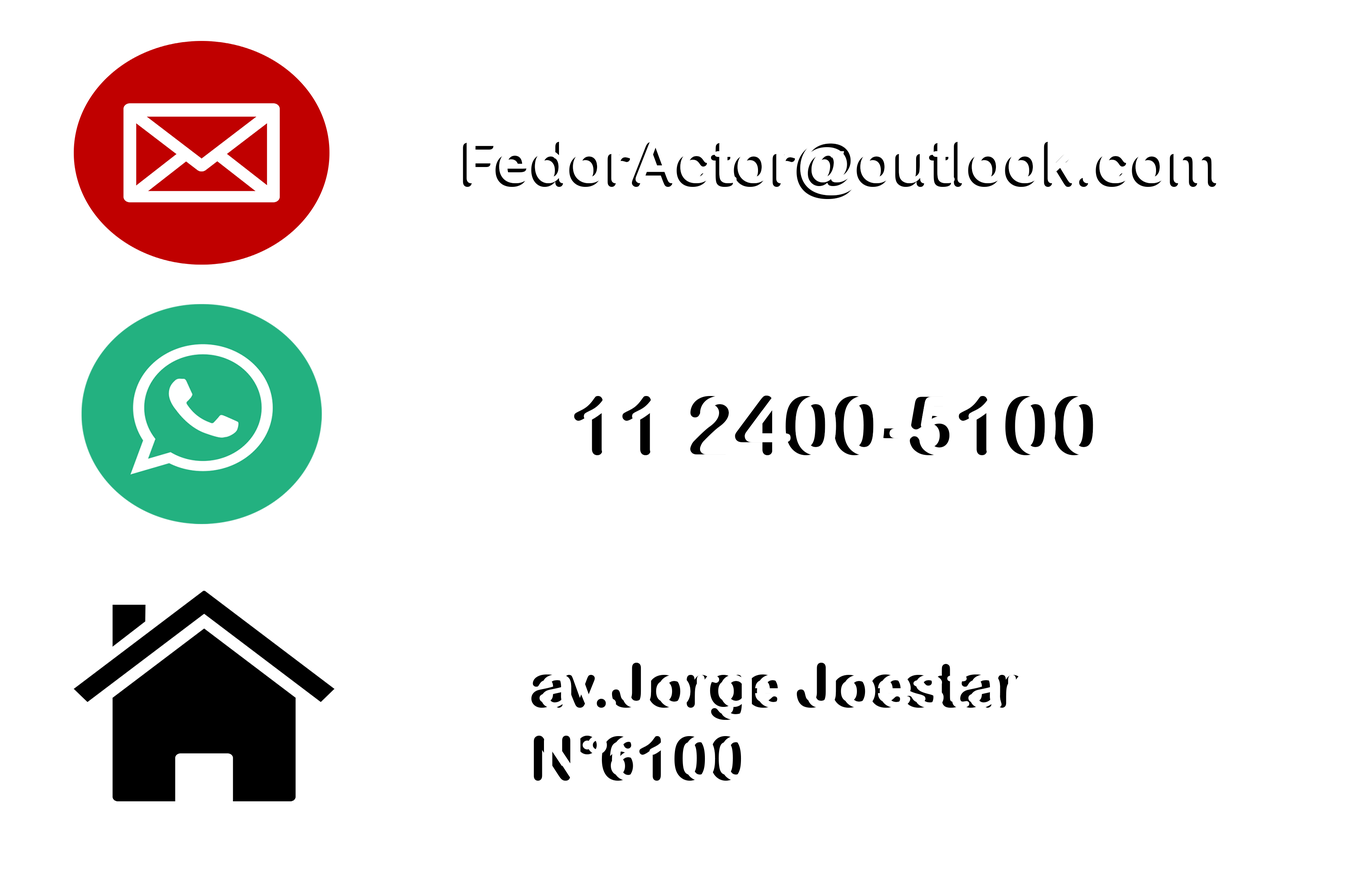
<style>
.page{position:relative;width:1351px;height:882px;background:#ffffff}
.page>*{position:absolute;margin:0}
.t1{font:60.8px "ArialRoundedMTBold"}
.t2{font:81.1px "ArialRoundedMTBold";color:#000000}
.t3{font:81.1px "ArialRoundedMTBold";color:#ffffff}
.t4{font:60.8px "ArialRoundedMTBold";color:#000000}
</style>
<div class="page">
<p class="t1" style="left:463px;top:142px;width:754px;height:57px">FedorActor@outlook.com</p>
<p class="t2" style="left:574px;top:395px;width:521px;height:60px">11 2400-5100</p>
<p class="t3" style="left:584px;top:395px;width:521px;height:60px">11 2400-5100</p>
<p class="t4" style="left:532px;top:663px;width:489px;height:118px">av.Jorge Joestar<br>N°6100</p>
</div>
